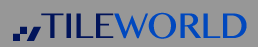
<style>
.page{position:relative;width:258px;height:47px;background:#979797}
.page>*{position:absolute;margin:0}
.t1{font:36px "MyanmarMN";letter-spacing:-0.01em;color:#0048be}
.t2{font:14px "Webdings";letter-spacing:-0.01em;color:#01145a}
.t3{font:36px "MyanmarMN";letter-spacing:-0.01em;color:#01145a}
</style>
<div class="page">
<p class="t1" style="left:13px;top:12px;width:234px;height:29px"><span class="t2">./</span><span class="t3">TILE</span>WORLD</p>
</div>
